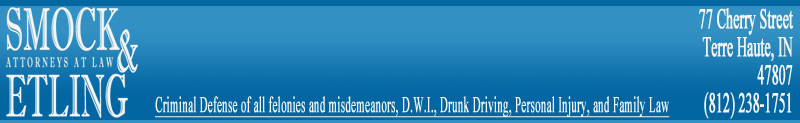
<style>
.page{position:relative;width:800px;height:123px;background:#3290c3}
.page>*{position:absolute;margin:0}
.t1{font:28.7px/28px "TimesNewRomanPSMT";letter-spacing:-0.02em;color:#f5f5f4;font-weight:bold;scale:0.49 1}
.t2{font:22.5px "TimesNewRomanPSMT";color:#f5f5f4;font-weight:bold;text-decoration:underline;scale:0.49 1}
</style>
<div class="page">
<p class="t1" style="left:699px;top:8px;width:95px;height:111px;text-align:right">77 Cherry Street<br>Terre Haute, IN<br>47807<br>(812) 238-1751</p>
<p class="t2" style="left:155px;top:96px;width:515px;height:22px">Criminal Defense of all felonies and misdemeanors, D.W.I., Drunk Driving, Personal Injury, and Family Law</p>
</div>
